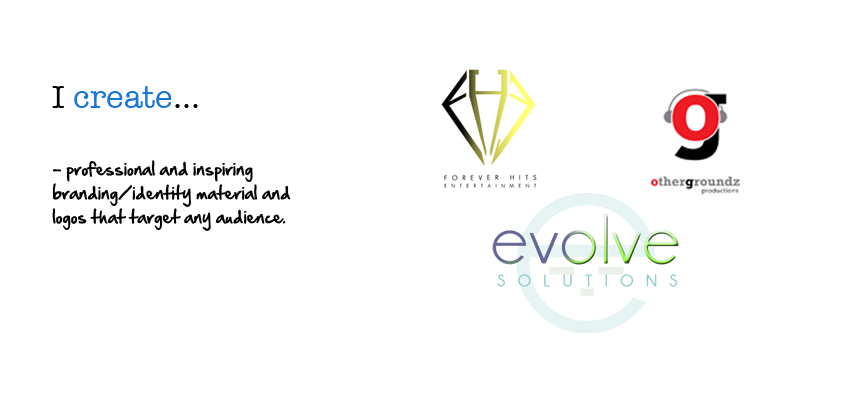
<style>
.page{position:relative;width:864px;height:400px;background:#ffffff}
.page>*{position:absolute;margin:0}
.t1{font:32.9px "AmericanTypewriter";color:#1877d8}
.t2{font:32.9px "AmericanTypewriter";color:#000000}
.t3{font:16px/24px "HandOfSean";color:#000000}
</style>
<div class="page">
<p class="t1" style="left:52px;top:86px;width:146px;height:22px"><span class="t2">I </span>create<span class="t2">...</span></p>
<p class="t3" style="left:52px;top:160px;width:239px;height:71px">- professional and inspiring branding/identity material and logos that target any audience.</p>
</div>
